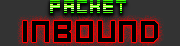
<style>
.page{position:relative;width:180px;height:46px;background:#333333}
.page>*{position:absolute;margin:0}
.t1{font:20.4px "Kenney-Future-Square";letter-spacing:0.02em}
.t2{font:33.5px "Kenney-Future-Square";letter-spacing:0.02em;color:#000000}
</style>
<div class="page">
<p class="t1" style="left:50px;top:0px;width:76px;height:13px">Packet</p>
<p class="t2" style="left:23px;top:21px;width:135px;height:21px">INBOUND</p>
</div>
